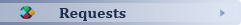
<style>
.page{position:relative;width:241px;height:25px}
.page>*{position:absolute;margin:0}
.t1{font:16px "Cambria-Bold";color:#202f4e}
</style>
<div class="page">
<p class="t1" style="left:59px;top:8px;width:67px;height:13px">Requests</p>
</div>
